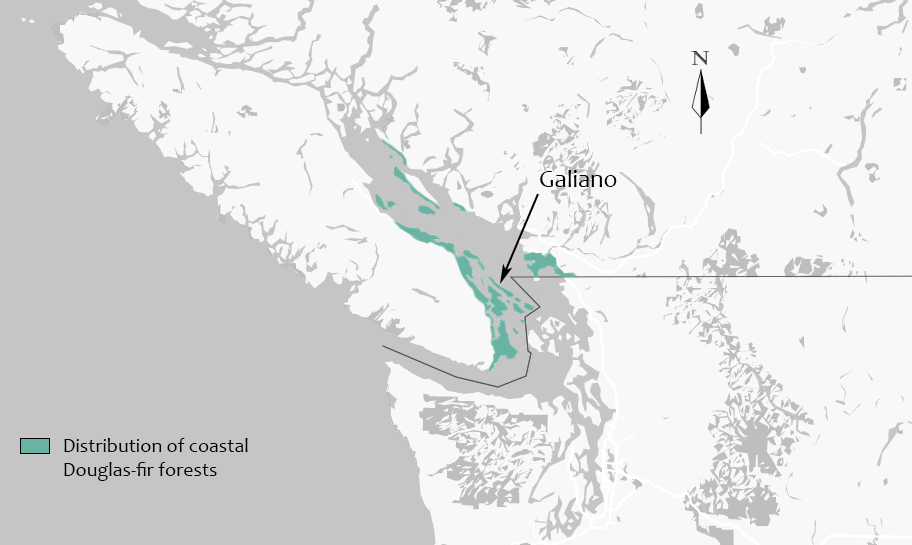
<style>
.page{position:relative;width:912px;height:545px;background:#f8f8f8}
.page>*{position:absolute;margin:0}
.t1{font:20px "Castellar";color:#292929}
.t2{font:25px "Candara";color:#000000}
.t3{font:20px "Candara";color:#000000}
</style>
<div class="page">
<p class="t1" style="left:691px;top:51px;width:19px;height:14px">N</p>
<p class="t2" style="left:540px;top:170px;width:77px;height:17px">Galiano</p>
<p class="t3" style="left:64px;top:438px;width:184px;height:43px">Distribution of coastal <br>Douglas-fir forests</p>
</div>
